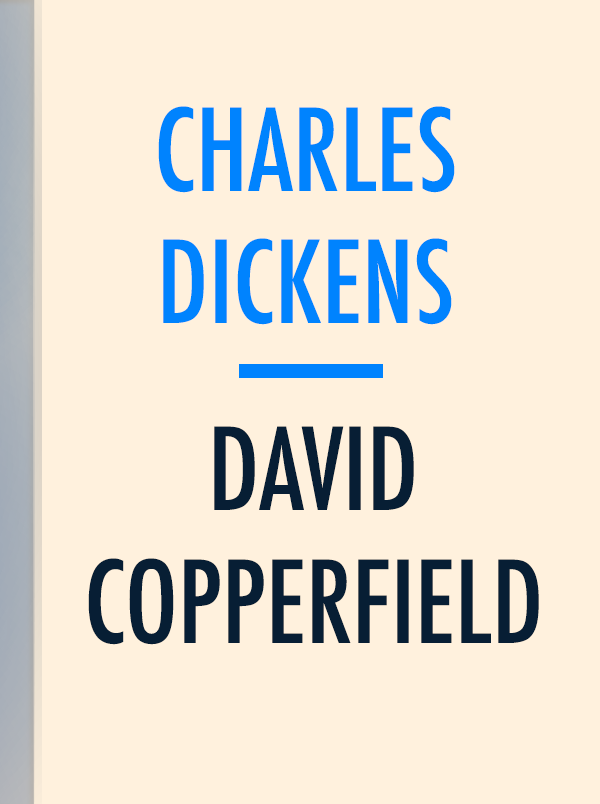
<style>
.page{position:relative;width:600px;height:804px;background:#fff1dd}
.page>*{position:absolute;margin:0}
.t1{font:110.4px "Futura-CondensedMedium";color:#0083fe}
.t2{font:110.4px "Futura-CondensedMedium";color:#071e34}
</style>
<div class="page">
<p class="t1" style="left:158px;top:106px;width:297px;height:219px;text-align:center">CHARLES<br>DICKENS</p>
<p class="t2" style="left:88px;top:426px;width:451px;height:219px;text-align:center">DAVID<br>COPPERFIELD</p>
</div>
